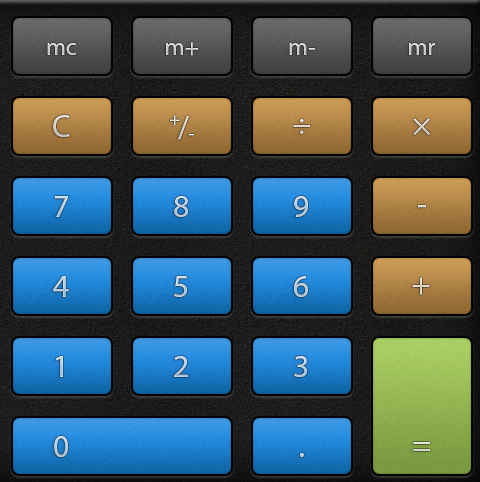
<style>
.page{position:relative;width:480px;height:482px}
.page>*{position:absolute;margin:0}
.t1{font:24px "MyriadPro-Regular";color:#cecfd0}
.t2{font:24px "MyriadPro-Regular";color:#ced0d2}
.t3{font:24px "MyriadPro-Regular";color:#cfcfd1}
.t4{font:24px "MyriadPro-Regular";color:#cbcdcf}
.t5{font:32px "MyriadPro-Regular";color:#dbd4c8}
.t6{font:18px "MyriadPro-Regular";color:#ede9e2}
.t7{font:32px "MyriadPro-Regular";color:#e0d9d1}
.t8{font:32px "MyriadPro-Regular";color:#e3dcd2}
.t9{font:32px "MyriadPro-Regular";color:#dad3cb}
.t10{font:20px "MyriadPro-Regular";color:#ffffff}
.t11{font:32px "MyriadPro-Regular";color:#c3dbee}
.t12{font:32px "MyriadPro-Regular";color:#bcd2e6}
.t13{font:32px "MyriadPro-Regular";color:#bfd4e7}
.t14{font:32px "MyriadPro-Regular";color:#ebe4d9}
.t15{font:32px "MyriadPro-Regular";color:#bcd2e5}
.t16{font:32px "MyriadPro-Regular";color:#c1d8e9}
.t17{font:32px "MyriadPro-Regular";color:#bbd2e4}
.t18{font:32px "MyriadPro-Regular";color:#e0dad1}
.t19{font:32px "MyriadPro-Regular";color:#bfd4e9}
.t20{font:32px "MyriadPro-Regular";color:#bbcee1}
.t21{font:32px "MyriadPro-Regular";color:#bfd5e7}
.t22{font:32px "MyriadPro-Regular";color:#bdd3e6}
.t23{font:32px "MyriadPro-Regular";color:#e2e8d7}
.t24{font:32px "MyriadPro-Regular";color:#b4cde1}
</style>
<div class="page">
<p class="t1" style="left:47px;top:43px;width:29px;height:12px">mc</p>
<p class="t2" style="left:166px;top:42px;width:33px;height:14px">m+</p>
<p class="t3" style="left:289px;top:43px;width:26px;height:12px">m-</p>
<p class="t4" style="left:409px;top:43px;width:26px;height:12px">mr</p>
<p class="t5" style="left:53px;top:115px;width:17px;height:22px">C</p>
<p class="t6" style="left:170px;top:115px;width:10px;height:11px">+</p>
<p class="t7" style="left:178px;top:116px;width:11px;height:24px">/</p>
<p class="t8" style="left:293px;top:119px;width:17px;height:15px">÷</p>
<p class="t9" style="left:413px;top:118px;width:17px;height:17px">×</p>
<p class="t10" style="left:189px;top:134px;width:5px;height:2px">-</p>
<p class="t11" style="left:55px;top:196px;width:13px;height:21px">7</p>
<p class="t12" style="left:174px;top:196px;width:14px;height:21px">8</p>
<p class="t13" style="left:294px;top:196px;width:14px;height:21px">9</p>
<p class="t14" style="left:418px;top:205px;width:8px;height:3px">-</p>
<p class="t15" style="left:53px;top:276px;width:16px;height:21px">4</p>
<p class="t16" style="left:174px;top:276px;width:13px;height:21px">5</p>
<p class="t17" style="left:294px;top:276px;width:14px;height:21px">6</p>
<p class="t18" style="left:412px;top:277px;width:18px;height:18px">+</p>
<p class="t19" style="left:56px;top:356px;width:7px;height:21px">1</p>
<p class="t20" style="left:174px;top:356px;width:14px;height:21px">2</p>
<p class="t21" style="left:294px;top:356px;width:13px;height:21px">3</p>
<p class="t22" style="left:54px;top:436px;width:14px;height:21px">0</p>
<p class="t23" style="left:413px;top:442px;width:17px;height:9px">=</p>
<p class="t24" style="left:300px;top:453px;width:4px;height:4px">.</p>
</div>
